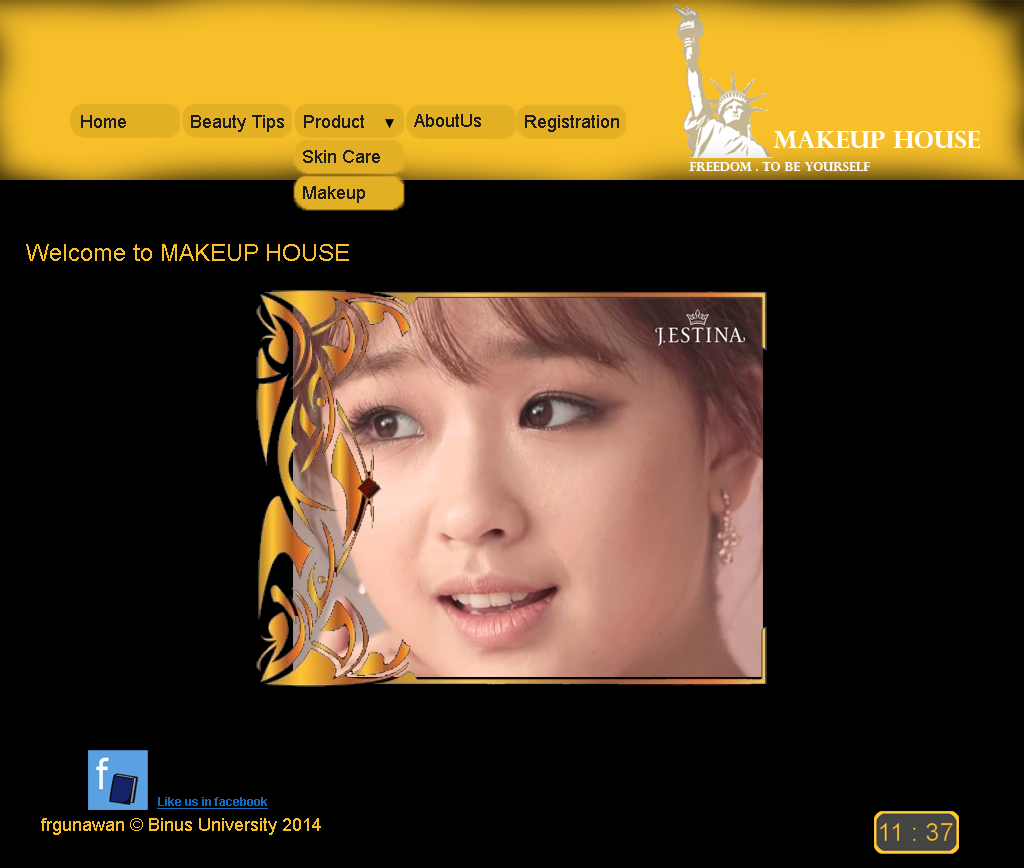
<style>
.page{position:relative;width:1024px;height:868px;background:#000000}
.page>*{position:absolute;margin:0}
.t1{font:18px "ArialMT";color:#1d1d1d}
.t2{font:24px "ArialMT";color:#f7bf29}
.t3{font:12px "Arial-BoldMT";color:#116bc0;text-decoration:underline}
.t4{font:18px "ArialMT";color:#f7bf29}
</style>
<div class="page">
<p class="t1" style="left:81px;top:115px;width:45px;height:13px">Home</p>
<p class="t1" style="left:191px;top:115px;width:93px;height:17px">Beauty Tips</p>
<p class="t1" style="left:304px;top:115px;width:60px;height:13px">Product</p>
<p class="t1" style="left:414px;top:114px;width:67px;height:13px">AboutUs</p>
<p class="t1" style="left:525px;top:115px;width:94px;height:17px">Registration</p>
<p class="t1" style="left:303px;top:150px;width:77px;height:13px">Skin Care</p>
<p class="t1" style="left:303px;top:186px;width:62px;height:17px">Makeup</p>
<p class="t2" style="left:26px;top:244px;width:323px;height:17px">Welcome to MAKEUP HOUSE</p>
<p class="t3" style="left:157px;top:797px;width:111px;height:12px">Like us in facebook</p>
<p class="t4" style="left:41px;top:818px;width:280px;height:17px">frgunawan © Binus University 2014</p>
</div>
